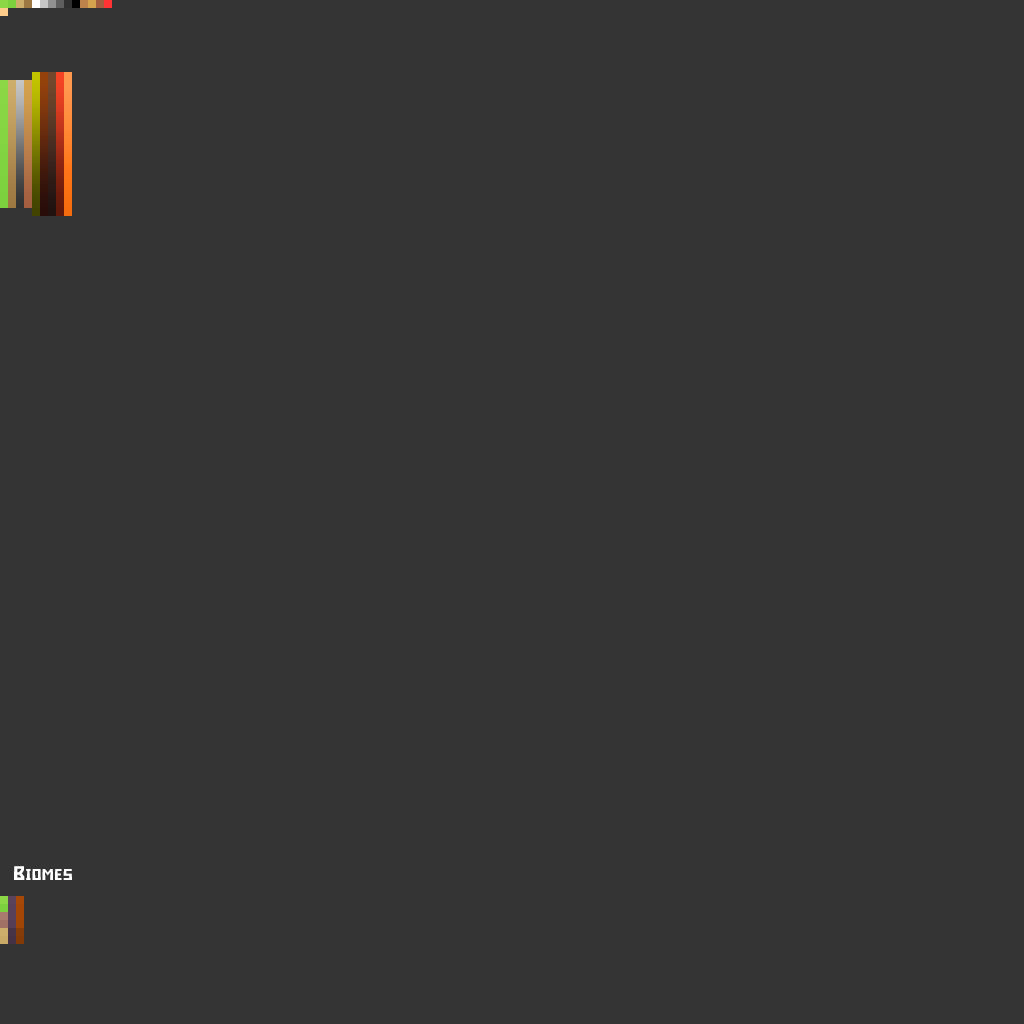
<style>
.page{position:relative;width:1024px;height:1024px;background:#343434}
.page>*{position:absolute;margin:0}
.t1{font:20px "Bidan";color:#ffffff}
</style>
<div class="page">
<p class="t1" style="left:14px;top:866px;width:58px;height:14px">Biomes</p>
</div>
